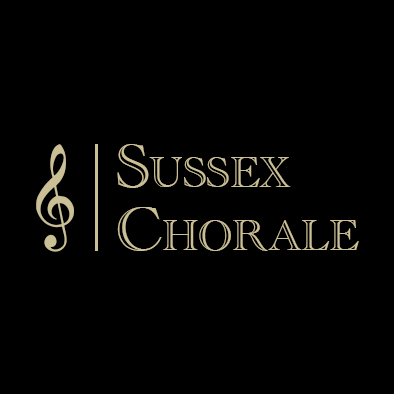
<style>
.page{position:relative;width:394px;height:394px;background:#000000}
.page>*{position:absolute;margin:0}
.t1{font:105px "MusiSync";color:#cabf95}
.t2{font:64px/63px "AcademyEngravedLetPlain";color:#cabf95;font-variant:small-caps}
</style>
<div class="page">
<p class="t1" style="left:36px;top:144px;width:38px;height:108px">G</p>
<p class="t2" style="left:117px;top:144px;width:242px;height:107px">Sussex<br>Chorale</p>
</div>
